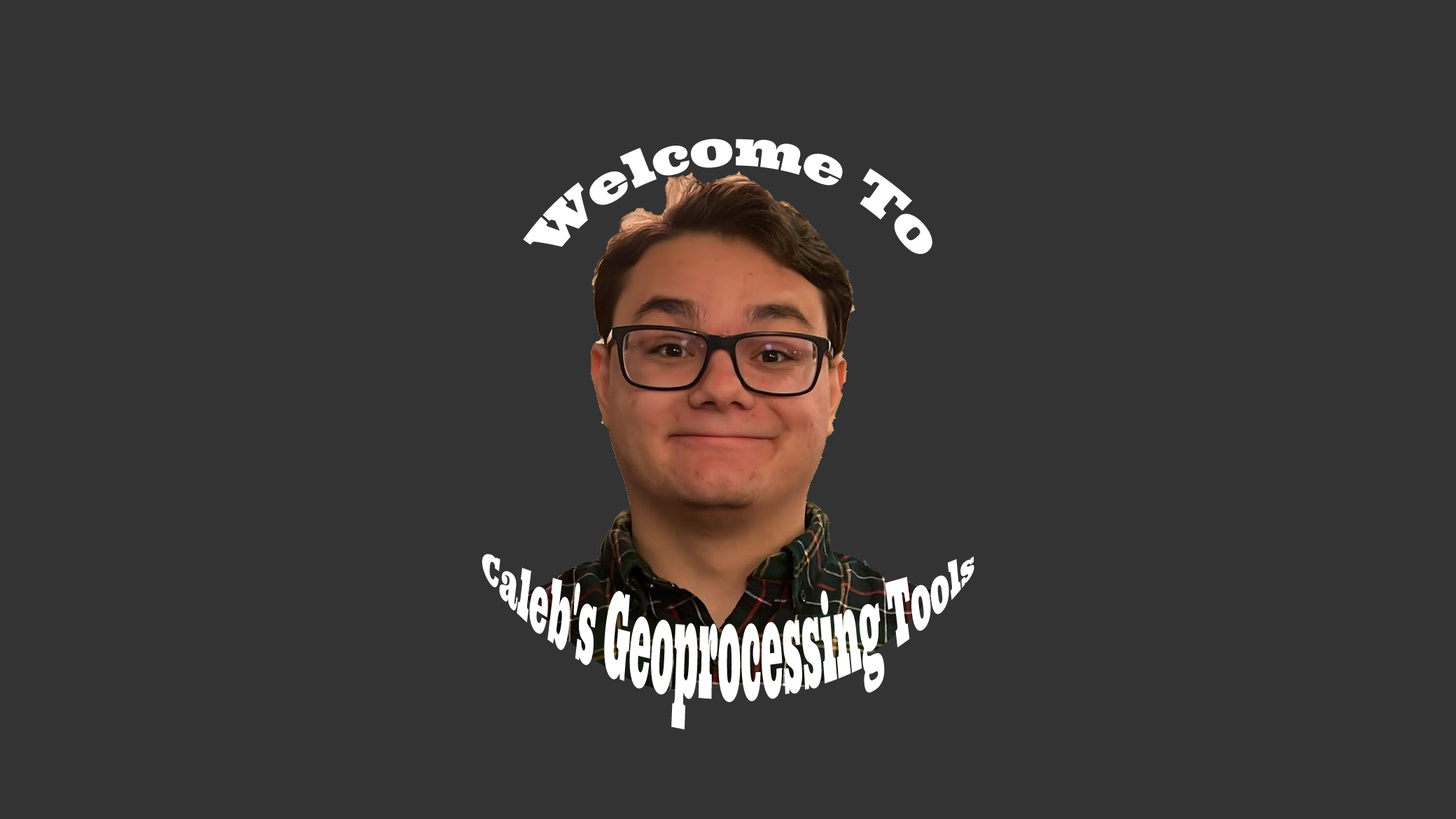
<style>
.page{position:relative;width:1456px;height:819px;background:#333333}
.page>*{position:absolute;margin:0}
.t1{font:49px "Ultra-Regular";color:#ffffff}
.t2{font:28px "Ultra-Regular";color:#ffffff}
</style>
<div class="page">
<p class="t1" style="left:523px;top:139px;width:409px;height:116px">Welcome To</p>
<p class="t2" style="left:482px;top:554px;width:492px;height:175px">Caleb's Geoprocessing Tools</p>
</div>
